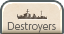
<style>
.page{position:relative;width:64px;height:34px}
.page>*{position:absolute;margin:0}
.t1{font:10px "UDShinGoPro-Light";color:#6a6560;scale:0.9 1}
</style>
<div class="page">
<p class="t1" style="left:7px;top:22px;width:49px;height:11px">Destroyers</p>
</div>
